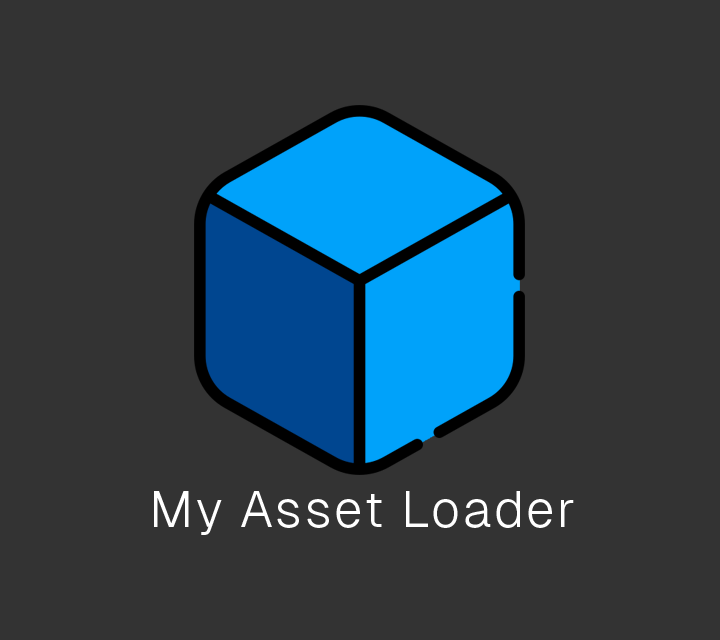
<style>
.page{position:relative;width:720px;height:640px;background:#333333}
.page>*{position:absolute;margin:0}
.t1{font:51px "Geist-Light";letter-spacing:0.05em;color:#ffffff}
</style>
<div class="page">
<p class="t1" style="left:154px;top:491px;width:420px;height:44px">My Asset Loader</p>
</div>
